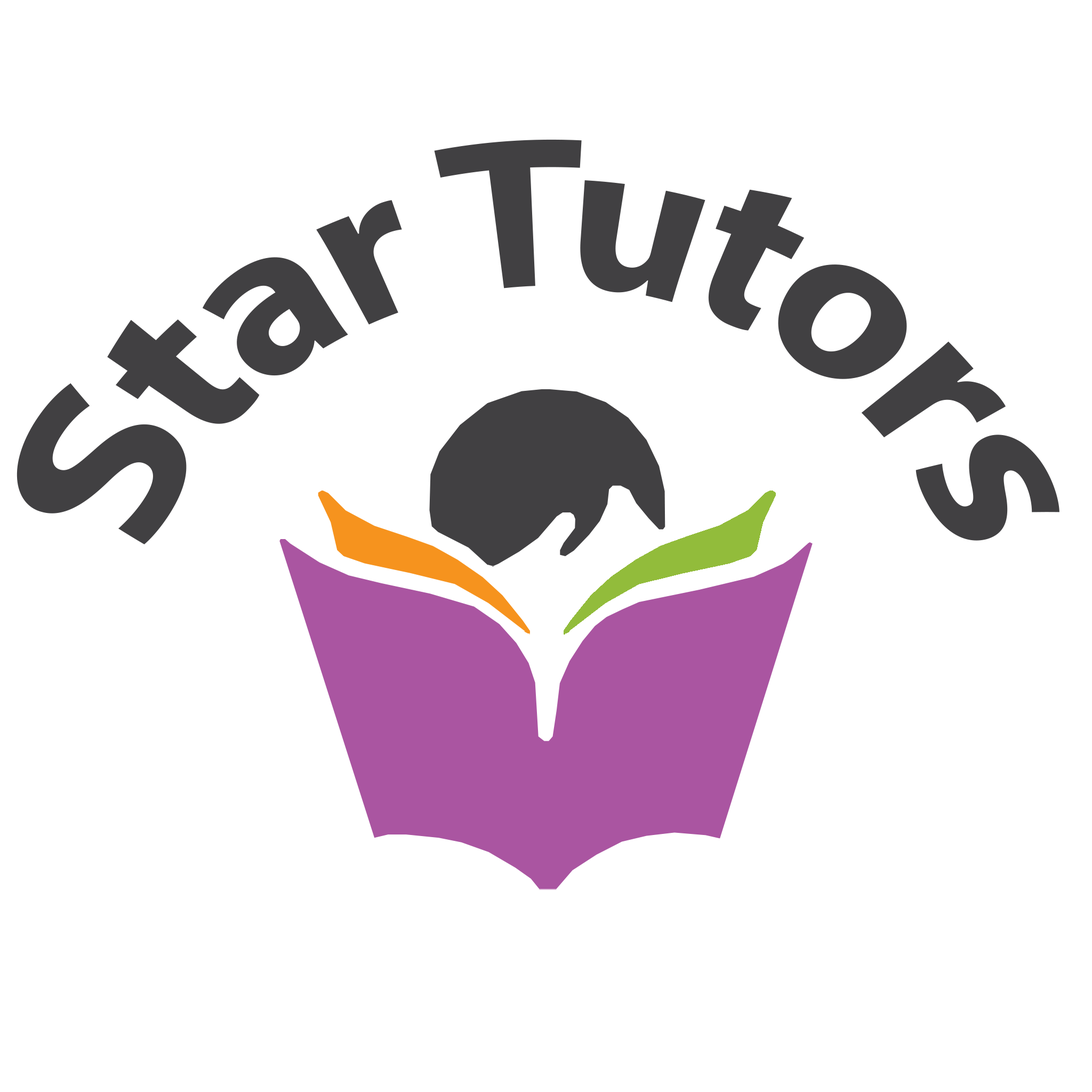
<style>
.page{position:relative;width:1092px;height:1092px;background:#ffffff}
.page>*{position:absolute;margin:0}
.t1{font:160px "MyriadPro-Bold";color:#414042}
</style>
<div class="page">
<p class="t1" style="left:17px;top:139px;width:1042px;height:405px">Star Tutors</p>
</div>
